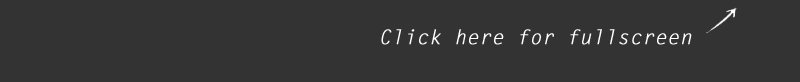
<style>
.page{position:relative;width:800px;height:82px;background:#333333}
.page>*{position:absolute;margin:0}
.t1{font:20px "LetterGothicStd-Slanted";color:#ffffff;font-weight:bold}
</style>
<div class="page">
<p class="t1" style="left:381px;top:29px;width:311px;height:16px">Click here for fullscreen</p>
</div>
